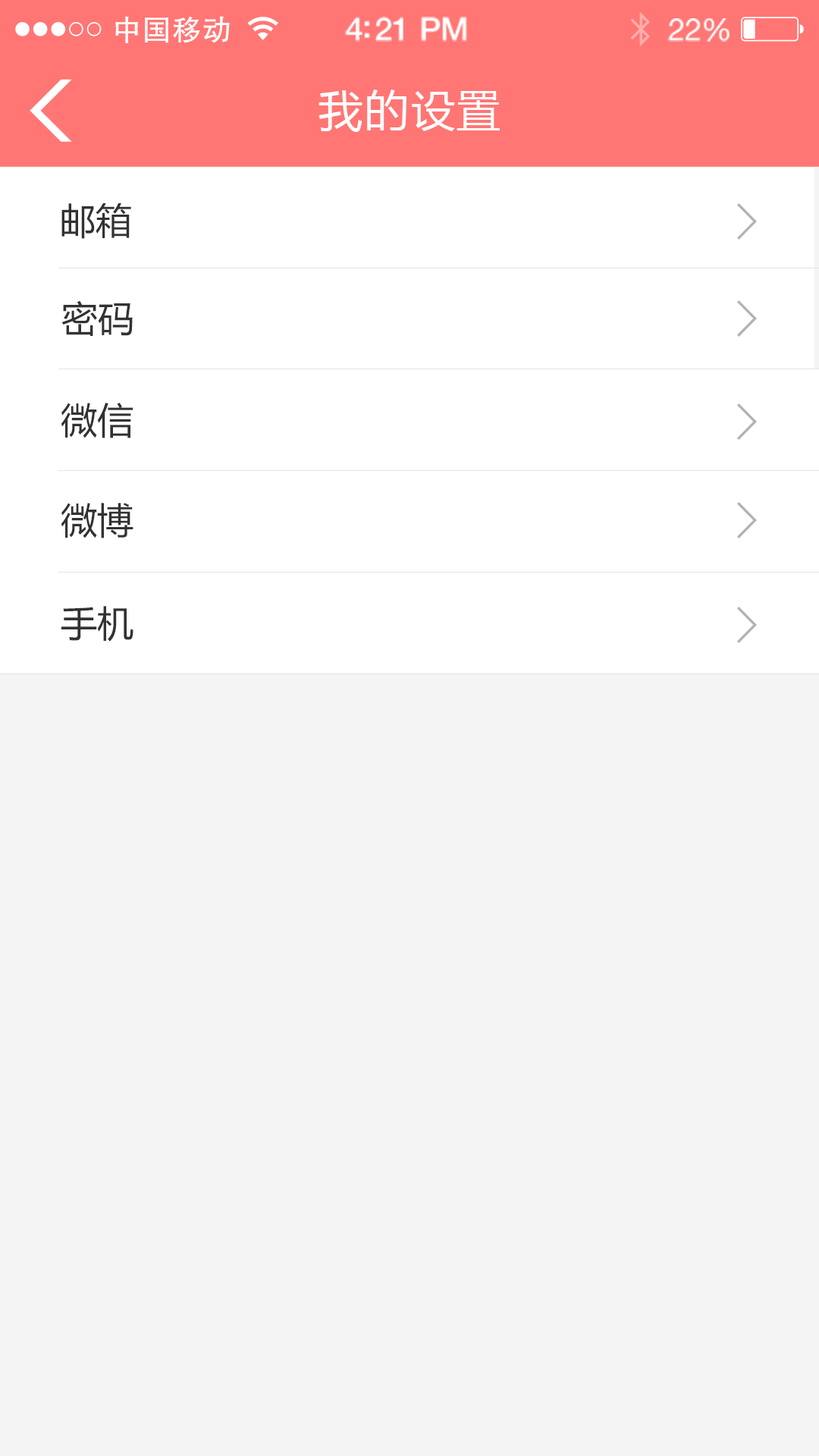
<style>
.page{position:relative;width:819px;height:1456px;background:#f4f4f4}
.page>*{position:absolute;margin:0}
.t1{font:29.4px "FZHTJW--GB1-0";letter-spacing:0.02em;color:#ffffff}
.t2{font:32px "HelveticaNeue-Medium";letter-spacing:-0.02em;color:#ffffff}
.t3{font:30.7px "HelveticaNeue";letter-spacing:-0.02em;color:#ffffff}
.t4{font:44px "MicrosoftYaHei";letter-spacing:0.05em;color:#ffffff}
.t5{font:36.4px "MicrosoftYaHei";color:#323232}
</style>
<div class="page">
<p class="t1" style="left:115px;top:16px;width:115px;height:27px">中国移动</p>
<p class="t2" style="left:345px;top:17px;width:122px;height:25px">4:21 PM</p>
<p class="t3" style="left:667px;top:18px;width:63px;height:24px">22%</p>
<p class="t4" style="left:318px;top:89px;width:182px;height:43px">我的设置</p>
<p class="t5" style="left:61px;top:203px;width:70px;height:36px">邮箱</p>
<p class="t5" style="left:61px;top:300px;width:72px;height:36px">密码</p>
<p class="t5" style="left:61px;top:403px;width:72px;height:35px">微信</p>
<p class="t5" style="left:61px;top:503px;width:72px;height:35px">微博</p>
<p class="t5" style="left:61px;top:606px;width:72px;height:36px">手机</p>
</div>
